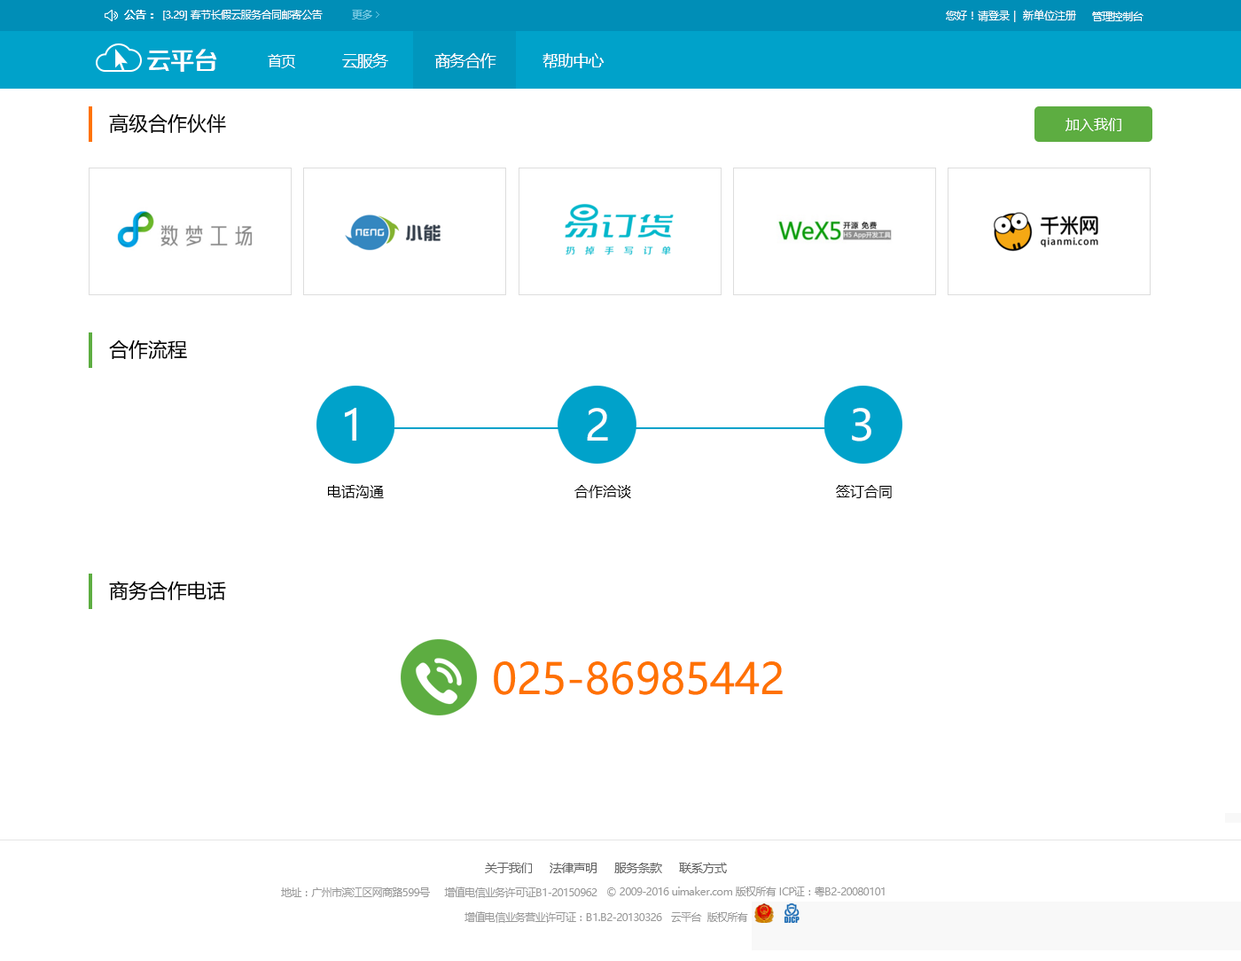
<style>
.page{position:relative;width:1241px;height:961px;background:#ffffff}
.page>*{position:absolute;margin:0}
.t1{font:10.6px "MicrosoftYaHei";letter-spacing:-0.05em;color:#ffffff;font-weight:bold}
.t2{font:10.6px "MicrosoftYaHei";letter-spacing:-0.05em;color:#ffffff}
.t3{font:10.6px "MicrosoftYaHei";letter-spacing:-0.05em;color:#7bcee6}
.t4{font:10.6px "MicrosoftYaHei";color:#ffffff}
.t5{font:24.8px "FZZZHONGJW--GB1-0";letter-spacing:-0.05em;color:#ffffff}
.t6{font:16px "MicrosoftYaHei";letter-spacing:-0.05em;color:#ffffff}
.t7{font:14.2px "MicrosoftYaHei";letter-spacing:-0.05em;color:#ffffff}
.t8{font:19.5px "MicrosoftYaHei";color:#000000}
.t9{font:14.2px "MicrosoftYaHei";color:#ffffff}
.t10{font:42.5px "MicrosoftYaHei";color:#ffffff}
.t11{font:14.2px "MicrosoftYaHei";color:#000000}
.t12{font:42.5px "MicrosoftYaHei";color:#ff7200}
.t13{font:12.4px "MicrosoftYaHei";letter-spacing:-0.05em;color:#666666}
.t14{font:10.6px "MicrosoftYaHei";letter-spacing:-0.05em;color:#999999}
</style>
<div class="page">
<p class="t1" style="left:124px;top:10px;width:29px;height:10px">公告：</p>
<p class="t2" style="left:163px;top:10px;width:160px;height:10px">[3.29] 春节长假云服务合同邮寄公告</p>
<p class="t3" style="left:352px;top:10px;width:20px;height:10px">更多</p>
<p class="t4" style="left:946px;top:10px;width:130px;height:12px">您好！请登录 |  新单位注册</p>
<p class="t2" style="left:1092px;top:12px;width:51px;height:9px">管理控制台</p>
<p class="t5" style="left:147px;top:49px;width:70px;height:23px">云平台</p>
<p class="t6" style="left:268px;top:53px;width:336px;height:15px"><span class="t7">首页</span>             云服务             商务合作             帮助中心</p>
<p class="t8" style="left:109px;top:113px;width:117px;height:20px">高级合作伙伴</p>
<p class="t9" style="left:1065px;top:118px;width:56px;height:13px">加入我们</p>
<p class="t8" style="left:109px;top:339px;width:78px;height:20px">合作流程</p>
<p class="t10" style="left:345px;top:408px;width:11px;height:33px">1</p>
<p class="t10" style="left:587px;top:408px;width:21px;height:33px">2</p>
<p class="t10" style="left:852px;top:408px;width:19px;height:33px">3</p>
<p class="t11" style="left:328px;top:485px;width:56px;height:13px">电话沟通</p>
<p class="t11" style="left:574px;top:485px;width:57px;height:13px">合作洽谈</p>
<p class="t11" style="left:836px;top:485px;width:56px;height:13px">签订合同</p>
<p class="t8" style="left:109px;top:581px;width:117px;height:19px">商务合作电话</p>
<p class="t12" style="left:494px;top:661px;width:289px;height:34px">025-86985442</p>
<p class="t13" style="left:485px;top:862px;width:242px;height:11px">关于我们      法律声明      服务条款      联系方式</p>
<p class="t14" style="left:281px;top:886px;width:316px;height:12px">地址：广州市滨江区网商路599号     增值电信业务许可证B1-20150962</p>
<p class="t14" style="left:607px;top:886px;width:278px;height:10px">© 2009-2016 uimaker.com 版权所有 ICP证：粤B2-20080101</p>
<p class="t14" style="left:464px;top:911px;width:284px;height:12px">增值电信业务营业许可证：B1.B2-20130326   云平台  版权所有</p>
</div>
